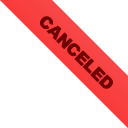
<style>
.page{position:relative;width:128px;height:128px;background:#ffffff}
.page>*{position:absolute;margin:0}
.t1{font:16.7px "Arial-Black";letter-spacing:-0.05em;color:#710000;text-transform:uppercase;font-weight:bold}
</style>
<div class="page">
<p class="t1" style="left:40px;top:16px;width:73px;height:73px;rotate:45deg">canceled</p>
</div>
